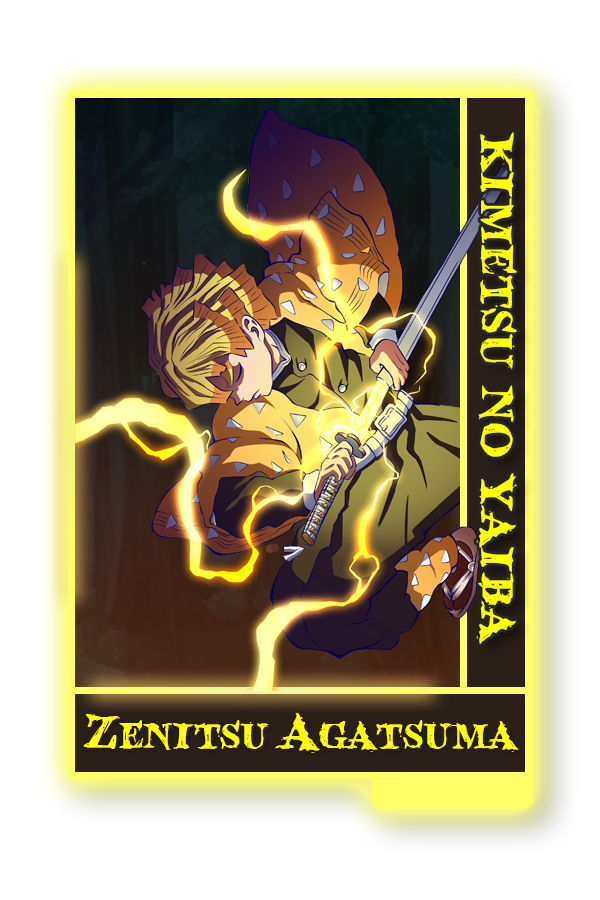
<style>
.page{position:relative;width:600px;height:900px;background:#ffffff}
.page>*{position:absolute;margin:0}
.t1{font:66.7px "BloodCrow";color:#ffff00}
.t2{font:52.9px "BloodCrow";color:#ffff00}
</style>
<div class="page">
<p class="t1" style="left:476px;top:132px;width:41px;height:512px;rotate:90deg">kimetsu no yaiba</p>
<p class="t2" style="left:83px;top:713px;width:436px;height:40px">Zenitsu Agatsuma</p>
</div>
